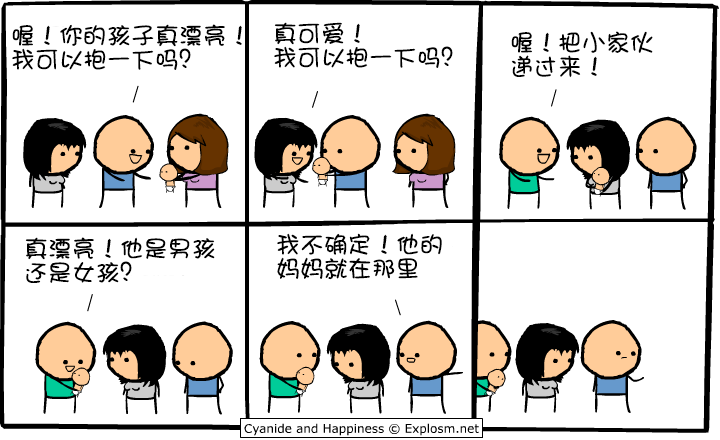
<style>
.page{position:relative;width:720px;height:440px;background:#ffffff}
.page>*{position:absolute;margin:0}
.t1{font:24px/24px "DFShaoNvW5";color:#000000}
</style>
<div class="page">
<p class="t1" style="left:12px;top:24px;width:230px;height:46px">喔！你的孩子真漂亮！<br>我可以抱一下吗？</p>
<p class="t1" style="left:274px;top:22px;width:179px;height:46px">真可爱！<br>我可以抱一下吗？</p>
<p class="t1" style="left:511px;top:31px;width:142px;height:47px">喔！把小家伙<br>递过来！</p>
<p class="t1" style="left:277px;top:233px;width:165px;height:47px">我不确定！他的<br>妈妈就在那里</p>
<p class="t1" style="left:25px;top:237px;width:190px;height:46px">真漂亮！他是男孩<br>还是女孩？</p>
</div>
